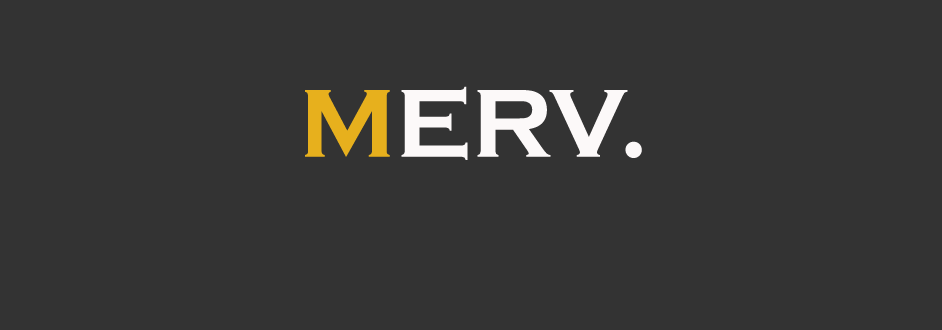
<style>
.page{position:relative;width:942px;height:330px;background:#333333}
.page>*{position:absolute;margin:0}
.t1{font:100px "CopperplateGothic-Bold";color:#fcf9f9}
.t2{font:100px "CopperplateGothic-Bold";color:#e7b01d}
</style>
<div class="page">
<p class="t1" style="left:305px;top:86px;width:337px;height:74px"><span class="t2">M</span>ERV.</p>
</div>
